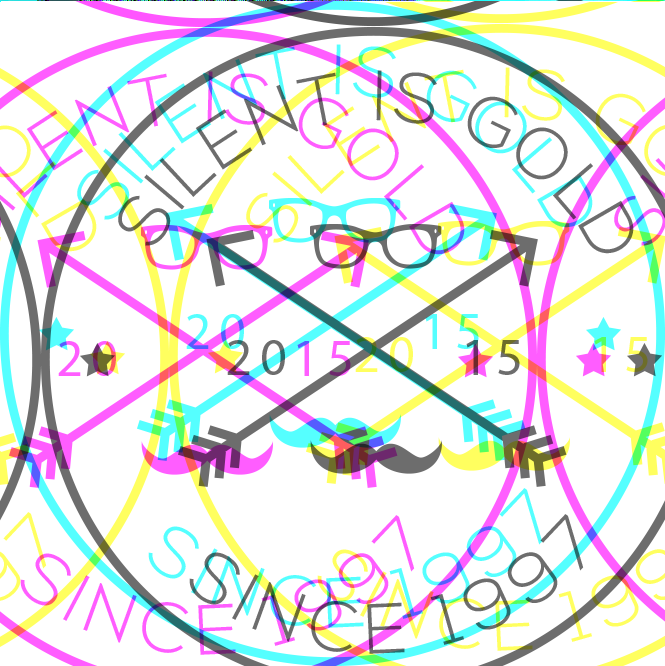
<style>
.page{position:relative;width:665px;height:666px;background:#ffffff}
.page>*{position:absolute;margin:0}
.t1{font:70.8px "NexaLight";letter-spacing:0.077em}
.t2{font:52.5px "MyriadPro-Regular";letter-spacing:0.15em}
</style>
<div class="page">
<p class="t1" style="left:77px;top:43px;width:516px;height:184px">SILENT IS GOLD</p>
<p class="t2" style="left:186px;top:313px;width:58px;height:35px">20</p>
<p class="t2" style="left:425px;top:313px;width:54px;height:35px">15</p>
<p class="t1" style="left:148px;top:487px;width:395px;height:140px">SINCE 1997</p>
</div>
